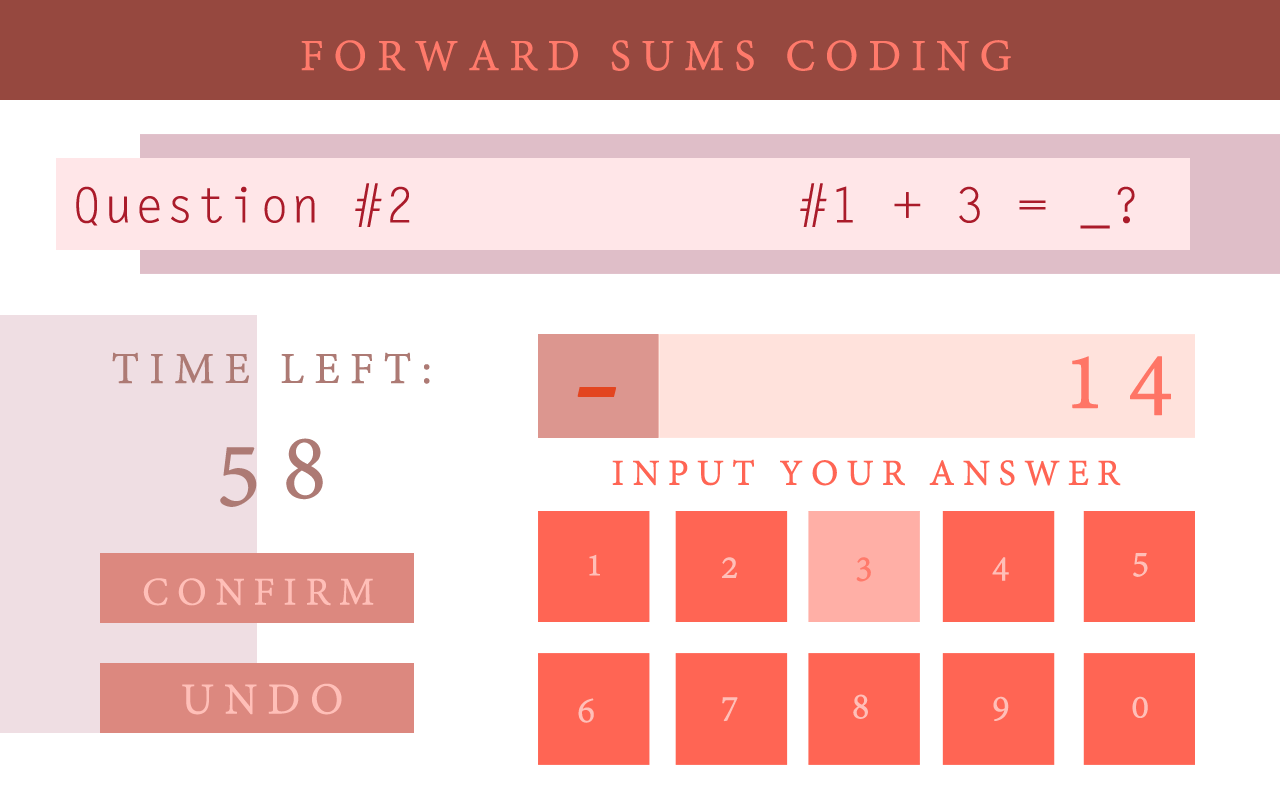
<style>
.page{position:relative;width:1280px;height:800px;background:#ffffff}
.page>*{position:absolute;margin:0}
.t1{font:48px "AdobeDevanagari-Regular";letter-spacing:0.2em;color:#ff7a6b;text-transform:uppercase;font-weight:bold}
.t2{font:48px "LetterGothicStd";letter-spacing:0.025em;color:#aa1b2a;font-weight:bold}
.t3{font:48px/114.9px "AdobeDevanagari-Regular";letter-spacing:0.2em;color:#ad7a74;text-transform:uppercase;font-weight:bold}
.t4{font:100px/114.9px "AdobeDevanagari-Regular";letter-spacing:0.2em;color:#ad7a74;text-transform:uppercase;font-weight:bold}
.t5{font:100px "AdobeDevanagari-Regular";letter-spacing:0.2em;color:#ff7566;text-transform:uppercase;font-weight:bold}
.t6{font:163.9px "AdobeDevanagari-Regular";letter-spacing:0.2em;color:#e34520;text-transform:uppercase;font-weight:bold}
.t7{font:39.3px "AdobeDevanagari-Regular";letter-spacing:0.2em;color:#ff6554;text-transform:uppercase;font-weight:bold}
.t8{font:39.3px "AdobeDevanagari-Regular";letter-spacing:0.2em;color:#ffbfb8;text-transform:uppercase;font-weight:bold}
.t9{font:39.3px "AdobeDevanagari-Regular";letter-spacing:0.2em;color:#ff7a6b;text-transform:uppercase;font-weight:bold}
.t10{font:42.3px "AdobeDevanagari-Regular";letter-spacing:0.2em;color:#ffbfb8;text-transform:uppercase;font-weight:bold}
.t11{font:48px "AdobeDevanagari-Regular";letter-spacing:0.2em;color:#ffbfb8;text-transform:uppercase;font-weight:bold}
</style>
<div class="page">
<p class="t1" style="left:301px;top:40px;width:710px;height:31px">Forward Sums Coding</p>
<p class="t2" style="left:76px;top:183px;width:334px;height:44px">Question #2</p>
<p class="t2" style="left:800px;top:183px;width:335px;height:46px">#1 + 3 = _?</p>
<p class="t3" style="left:112px;top:352px;width:318px;height:155px;text-align:center">Time Left: <br><span class="t4">58</span></p>
<p class="t5" style="left:1072px;top:356px;width:99px;height:60px">14</p>
<p class="t6" style="left:577px;top:387px;width:40px;height:10px">-</p>
<p class="t7" style="left:612px;top:459px;width:509px;height:27px">Input your Answer</p>
<p class="t8" style="left:589px;top:554px;width:11px;height:22px">1</p>
<p class="t8" style="left:722px;top:557px;width:16px;height:21px">2</p>
<p class="t9" style="left:856px;top:557px;width:15px;height:25px">3</p>
<p class="t8" style="left:992px;top:557px;width:17px;height:24px">4</p>
<p class="t8" style="left:1133px;top:553px;width:15px;height:24px">5</p>
<p class="t10" style="left:143px;top:578px;width:231px;height:28px">Confirm</p>
<p class="t11" style="left:182px;top:683px;width:160px;height:32px">Undo</p>
<p class="t8" style="left:578px;top:698px;width:16px;height:25px">6</p>
<p class="t8" style="left:722px;top:697px;width:16px;height:25px">7</p>
<p class="t8" style="left:853px;top:694px;width:15px;height:25px">8</p>
<p class="t8" style="left:993px;top:696px;width:16px;height:25px">9</p>
<p class="t8" style="left:1132px;top:696px;width:16px;height:22px">0</p>
</div>
